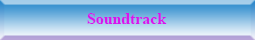
<style>
.page{position:relative;width:255px;height:40px}
.page>*{position:absolute;margin:0}
.t1{font:15.8px "TimesNewRomanPS-BoldMT";color:#d815ed}
</style>
<div class="page">
<p class="t1" style="left:87px;top:13px;width:80px;height:11px">Soundtrack</p>
</div>
